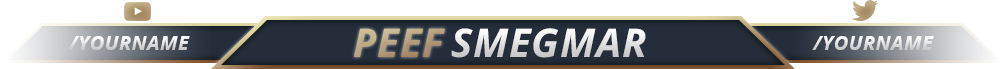
<style>
.page{position:relative;width:1004px;height:69px;background:#ffffff}
.page>*{position:absolute;margin:0}
.t1{font:39.6px "OpenSans-BoldItalic";letter-spacing:0.02em;color:#baa482}
.t2{font:39.6px "OpenSans-BoldItalic";letter-spacing:0.02em}
.t3{font:20px "OpenSans-BoldItalic";letter-spacing:0.02em}
</style>
<div class="page">
<p class="t1" style="left:354px;top:28px;width:91px;height:29px">PEEF</p>
<p class="t2" style="left:451px;top:28px;width:195px;height:30px">SMEGMAR</p>
<p class="t3" style="left:68px;top:36px;width:122px;height:14px">/YOURNAME</p>
<p class="t3" style="left:812px;top:36px;width:122px;height:14px">/YOURNAME</p>
</div>
